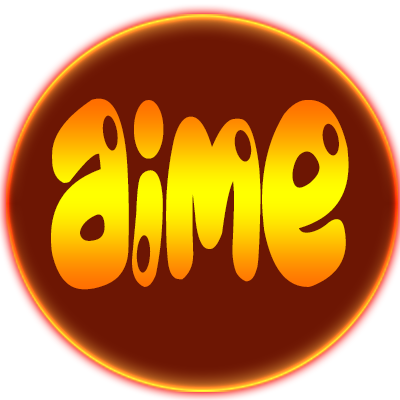
<style>
.page{position:relative;width:400px;height:400px;background:#6d1603}
.page>*{position:absolute;margin:0}
.t1{font:196.4px "JuicyFruity";scale:0.48 1}
</style>
<div class="page">
<p class="t1" style="left:51px;top:98px;width:298px;height:192px">aime</p>
</div>
